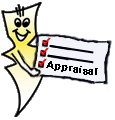
<style>
.page{position:relative;width:115px;height:120px;background:#ffffff}
.page>*{position:absolute;margin:0}
.t1{font:10px "ArialMT";color:#000000;font-weight:bold}
</style>
<div class="page">
<p class="t1" style="left:46px;top:61px;width:52px;height:14px;rotate:8deg">Appraisal</p>
</div>
